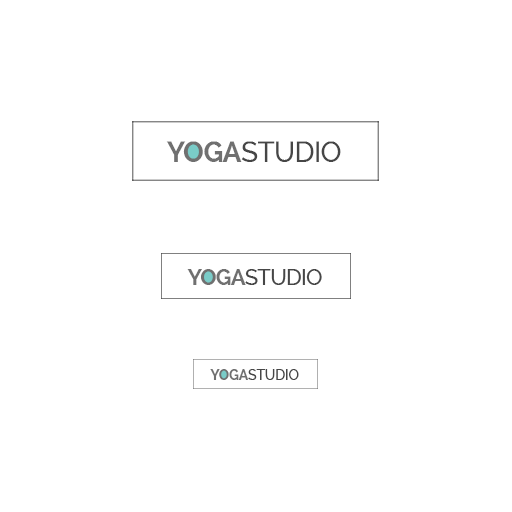
<style>
.page{position:relative;width:512px;height:512px;background:#ffffff}
.page>*{position:absolute;margin:0}
.t1{font:28.7px "Raleway-Medium";letter-spacing:-0.03em;color:#464646}
.t2{font:28.7px "Raleway-Bold";letter-spacing:-0.03em;color:#707070}
.t3{font:22px "Raleway-Medium";letter-spacing:-0.03em;color:#464646}
.t4{font:22px "Raleway-Bold";letter-spacing:-0.03em;color:#707070}
.t5{font:14.3px "Raleway-Medium";letter-spacing:-0.03em;color:#464646}
.t6{font:14.3px "Raleway-Bold";letter-spacing:-0.03em;color:#707070}
</style>
<div class="page">
<p class="t1" style="left:166px;top:141px;width:175px;height:21px"><span class="t2">YOGA</span>STUDIO</p>
<p class="t3" style="left:187px;top:269px;width:135px;height:16px"><span class="t4">YOGA</span>STUDIO</p>
<p class="t5" style="left:210px;top:369px;width:89px;height:11px"><span class="t6">YOGA</span>STUDIO</p>
</div>
